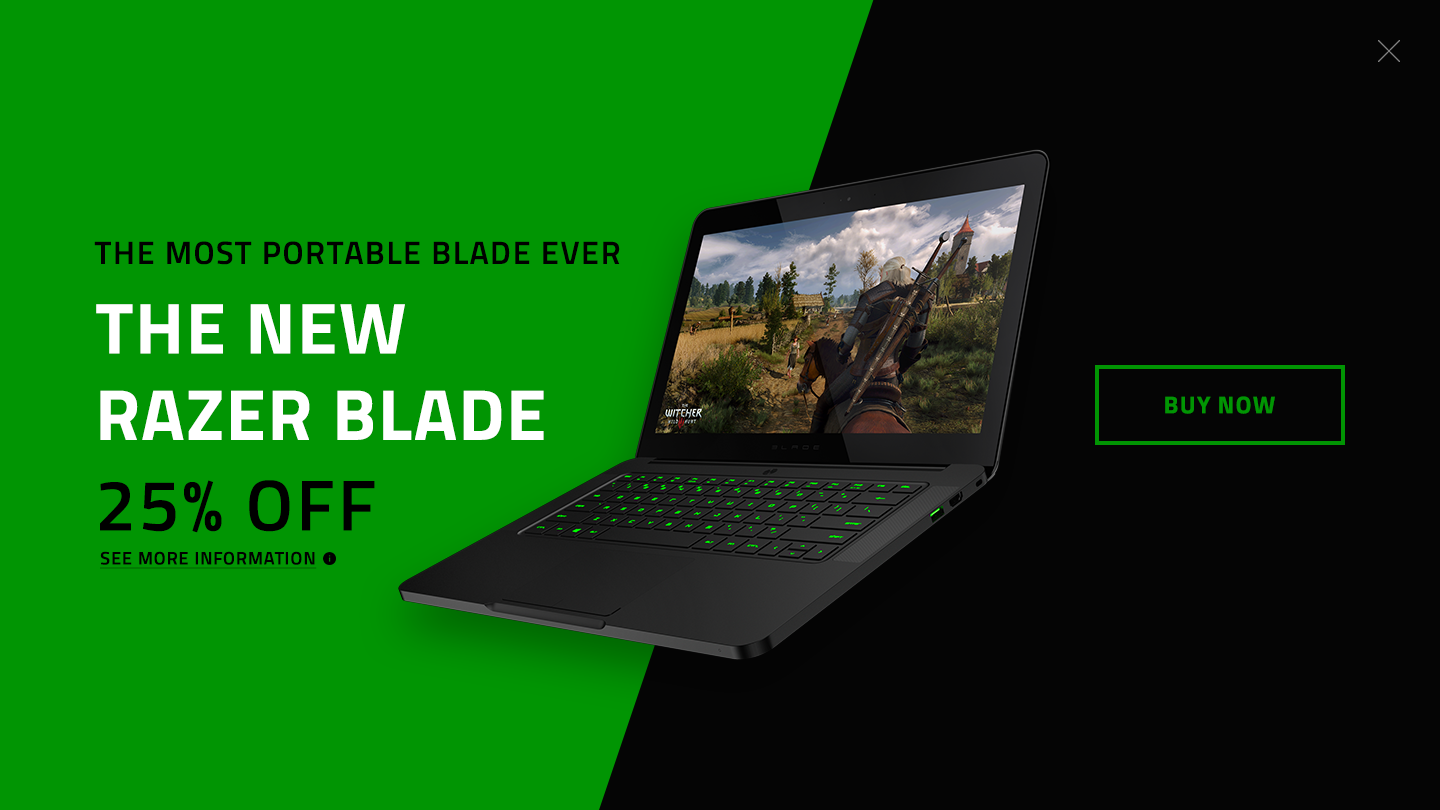
<style>
.page{position:relative;width:1440px;height:810px;background:#019503}
.page>*{position:absolute;margin:0}
.t1{font:32px "TitilliumWeb-SemiBold";letter-spacing:0.05em;color:#000000}
.t2{font:72px "TitilliumWeb-Bold";letter-spacing:0.025em;color:#ffffff}
.t3{font:24px "TitilliumWeb-Bold";letter-spacing:0.05em;color:#019503}
.t4{font:72px "TitilliumWeb-SemiBold";letter-spacing:0.05em;color:#000000}
.t5{font:18px "TitilliumWeb-SemiBold";letter-spacing:0.05em;color:#000000;text-decoration:underline}
</style>
<div class="page">
<p class="t1" style="left:94px;top:241px;width:526px;height:24px">THE MOST PORTABLE BLADE EVER</p>
<p class="t2" style="left:96px;top:304px;width:448px;height:136px">THE NEW<br>RAZER BLADE</p>
<p class="t3" style="left:1165px;top:396px;width:110px;height:18px">BUY NOW</p>
<p class="t4" style="left:100px;top:480px;width:275px;height:53px">25% OFF</p>
<p class="t5" style="left:100px;top:551px;width:217px;height:18px">SEE MORE INFORMATION</p>
</div>
